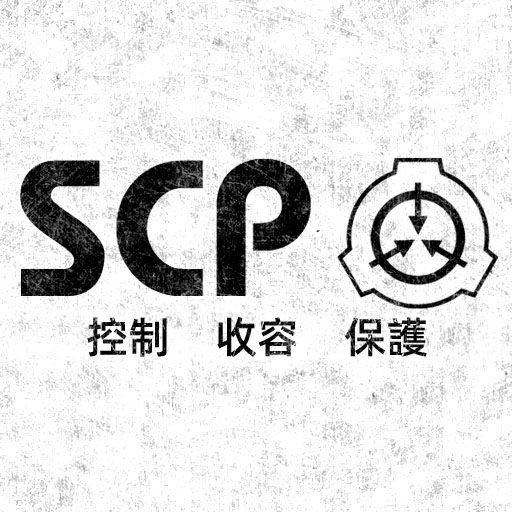
<style>
.page{position:relative;width:512px;height:512px;background:#ffffff}
.page>*{position:absolute;margin:0}
.t1{font:43px "AlibabaPuHuiTiM";color:#000000}
</style>
<div class="page">
<p class="t1" style="left:87px;top:317px;width:340px;height:41px">控制    收容    保護</p>
</div>
